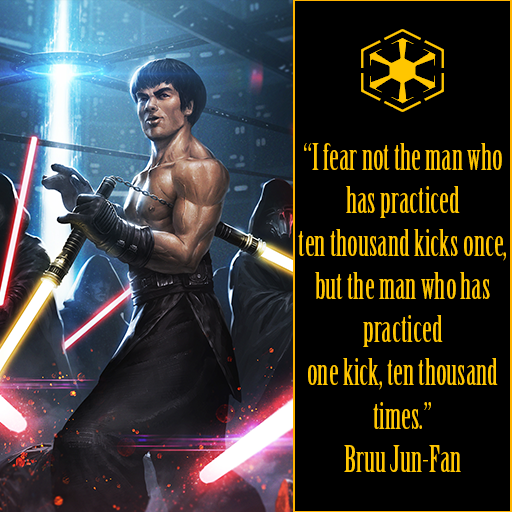
<style>
.page{position:relative;width:512px;height:512px;background:#000000}
.page>*{position:absolute;margin:0}
.t1{font:36px "BirchStd";color:#ffc600}
</style>
<div class="page">
<p class="t1" style="left:298px;top:143px;width:208px;height:329px;text-align:center">“I fear not the man who has practiced<br>ten thousand kicks once,<br>but the man who has practiced<br>one kick, ten thousand times.”<br>Bruu Jun-Fan</p>
</div>
